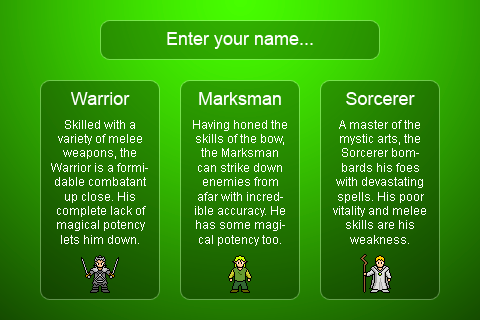
<style>
.page{position:relative;width:480px;height:320px}
.page>*{position:absolute;margin:0}
.t1{font:18px "ArialMT";color:#ffffff}
.t2{font:12px "ArialMT";color:#ffffff}
</style>
<div class="page">
<p class="t1" style="left:167px;top:32px;width:146px;height:17px">Enter your name...</p>
<p class="t1" style="left:71px;top:92px;width:59px;height:13px">Warrior</p>
<p class="t1" style="left:199px;top:92px;width:82px;height:13px">Marksman</p>
<p class="t1" style="left:346px;top:92px;width:69px;height:13px">Sorcerer</p>
<p class="t2" style="left:51px;top:120px;width:97px;height:124px;text-align:center">Skilled with a variety of melee weapons, the Warrior is a formidable combatant up close. His complete lack of magical potency lets him down.</p>
<p class="t2" style="left:193px;top:120px;width:94px;height:126px;text-align:center">Having honed the skills of the bow, the Marksman can strike down enemies from afar with incredible accuracy. He has some magical potency too.</p>
<p class="t2" style="left:333px;top:120px;width:93px;height:124px;text-align:center">A master of the mystic arts, the Sorcerer bombards his foes with devastating spells. His poor vitality and melee skills are his weakness.</p>
</div>
